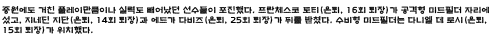
<style>
.page{position:relative;width:489px;height:37px;background:#ffffff}
.page>*{position:absolute;margin:0}
.t1{font:8.3px "H2mkpB";color:#000000}
</style>
<div class="page">
<p class="t1" style="left:2px;top:6px;width:488px;height:28px">중원에도 거친 플레이만큼이나 실력도 빼어났던 선수들이 포진했다. 프란체스코 토티(은퇴, 16회 퇴장)가 공격형 미드필더 자리에 <br>섰고, 지네딘 지단(은퇴, 14회 퇴장)과 에드가 다비즈(은퇴, 25회 퇴장)가 뒤를 받쳤다. 수비형 미드필더는 다니엘 데 로시(은퇴, <br>15회 퇴장)가 위치했다.</p>
</div>
